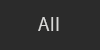
<style>
.page{position:relative;width:100px;height:50px;background:#2b2b2b}
.page>*{position:absolute;margin:0}
.t1{font:20px "ArialNarrow";letter-spacing:0.075em;color:#d9d9d8}
</style>
<div class="page">
<p class="t1" style="left:38px;top:17px;width:21px;height:14px">All</p>
</div>
